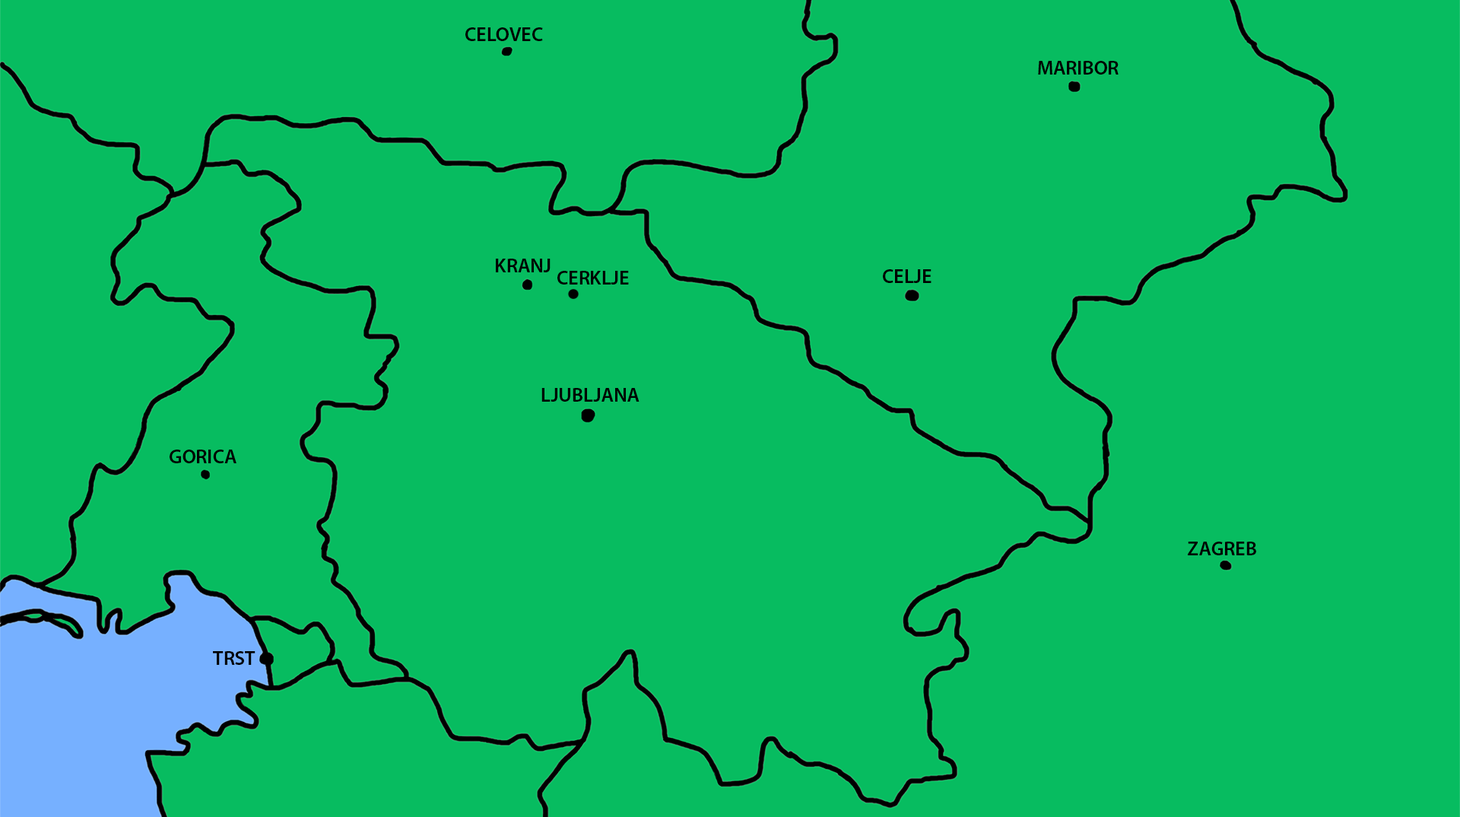
<style>
.page{position:relative;width:1460px;height:817px;background:#07bc60}
.page>*{position:absolute;margin:0}
.t1{font:19.8px "MyriadPro-Semibold";color:#000000}
</style>
<div class="page">
<p class="t1" style="left:465px;top:27px;width:78px;height:14px">CELOVEC</p>
<p class="t1" style="left:1038px;top:61px;width:81px;height:14px">MARIBOR</p>
<p class="t1" style="left:496px;top:259px;width:55px;height:13px">KRANJ</p>
<p class="t1" style="left:883px;top:269px;width:49px;height:14px">CELJE</p>
<p class="t1" style="left:557px;top:271px;width:72px;height:13px">CERKLJE</p>
<p class="t1" style="left:541px;top:388px;width:99px;height:14px">LJUBLJANA</p>
<p class="t1" style="left:170px;top:449px;width:66px;height:14px">GORICA</p>
<p class="t1" style="left:1188px;top:541px;width:68px;height:14px">ZAGREB</p>
<p class="t1" style="left:213px;top:651px;width:43px;height:14px">TRST</p>
</div>
